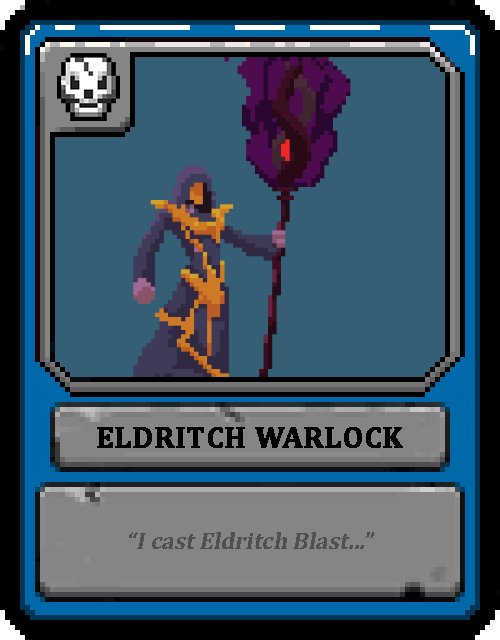
<style>
.page{position:relative;width:500px;height:640px;background:#355e77}
.page>*{position:absolute;margin:0}
.t1{font:30px "Cambria-Bold";color:#000000;text-transform:uppercase;font-weight:bold}
.t2{font:24px "Cambria-Bold";color:#505050;font-style:italic}
</style>
<div class="page">
<p class="t1" style="left:97px;top:427px;width:306px;height:21px">Eldritch Warlock</p>
<p class="t2" style="left:129px;top:532px;width:245px;height:17px">“I cast Eldritch Blast...”</p>
</div>
